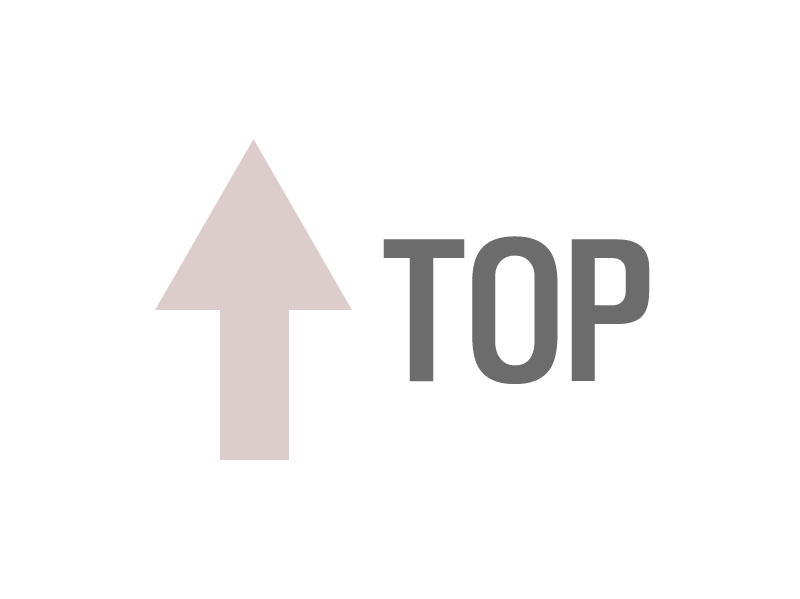
<style>
.page{position:relative;width:800px;height:599px;background:#ffffff}
.page>*{position:absolute;margin:0}
.t1{font:166.7px "H2hdrM";color:#6c6c6c}
</style>
<div class="page">
<p class="t1" style="left:383px;top:236px;width:267px;height:148px">TOP</p>
</div>
